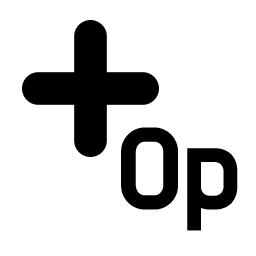
<style>
.page{position:relative;width:256px;height:256px;background:#ffffff}
.page>*{position:absolute;margin:0}
.t1{font:96.5px "BMDoHyeon";color:#000000}
</style>
<div class="page">
<p class="t1" style="left:121px;top:127px;width:117px;height:104px">Op</p>
</div>
